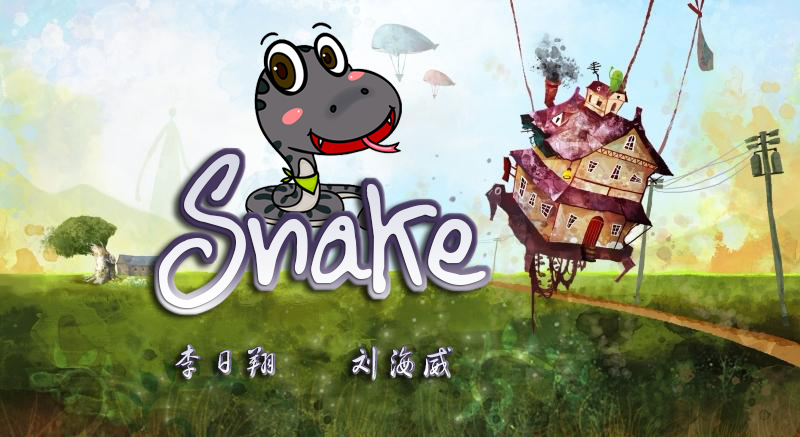
<style>
.page{position:relative;width:800px;height:437px}
.page>*{position:absolute;margin:0}
.t1{font:174.4px "BNFontBoy";color:#eff0f5;scale:0.9 1}
.t2{font:35.7px "FZHCJW--GB1-0";color:#e8e9f0}
.t3{font:35.7px "FZHCJW--GB1-0";color:#ffffff}
</style>
<div class="page">
<p class="t1" style="left:158px;top:154px;width:328px;height:155px">Snake</p>
<p class="t2" style="left:175px;top:344px;width:99px;height:33px">李日翔</p>
<p class="t3" style="left:352px;top:346px;width:99px;height:33px">刘海威</p>
</div>
